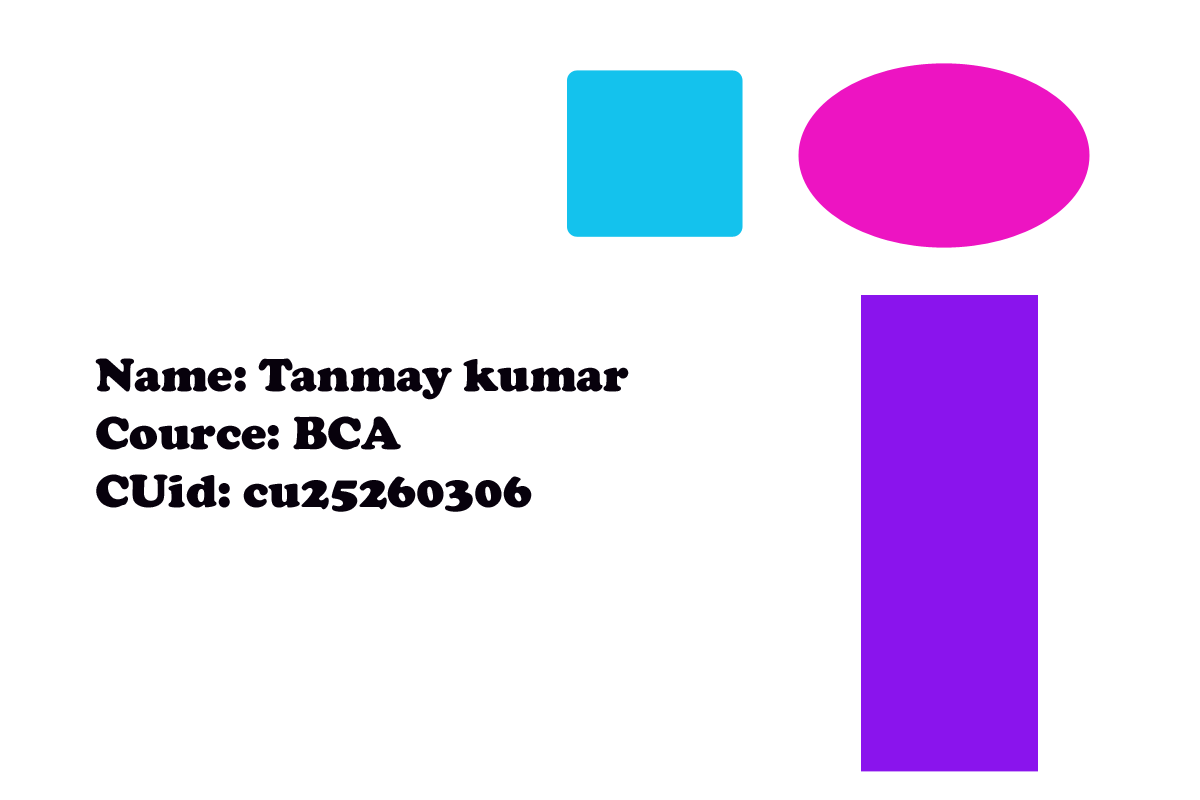
<style>
.page{position:relative;width:1200px;height:800px;background:#ffffff}
.page>*{position:absolute;margin:0}
.t1{font:48px "CooperBlack";color:#07010c}
</style>
<div class="page">
<p class="t1" style="left:95px;top:358px;width:534px;height:154px">Name: Tanmay kumar<br>Cource: BCA<br>CUid: cu25260306</p>
</div>
